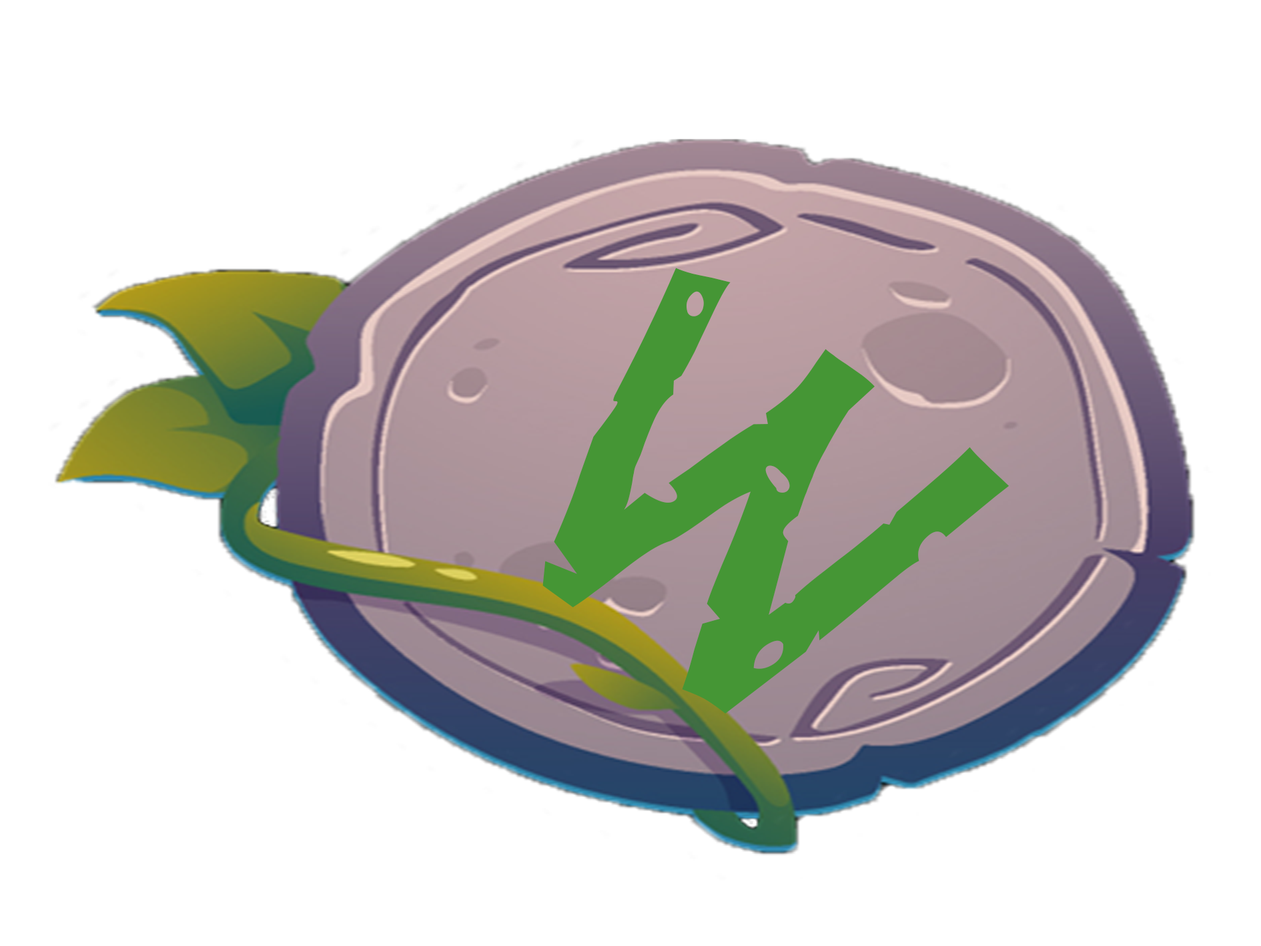
<style>
.page{position:relative;width:1261px;height:946px;background:#ffffff}
.page>*{position:absolute;margin:0}
.t1{font:500.5px "H2mkpB";color:#459635;scale:0.92 1}
</style>
<div class="page">
<p class="t1" style="left:542px;top:268px;width:468px;height:445px;rotate:35deg">W</p>
</div>
